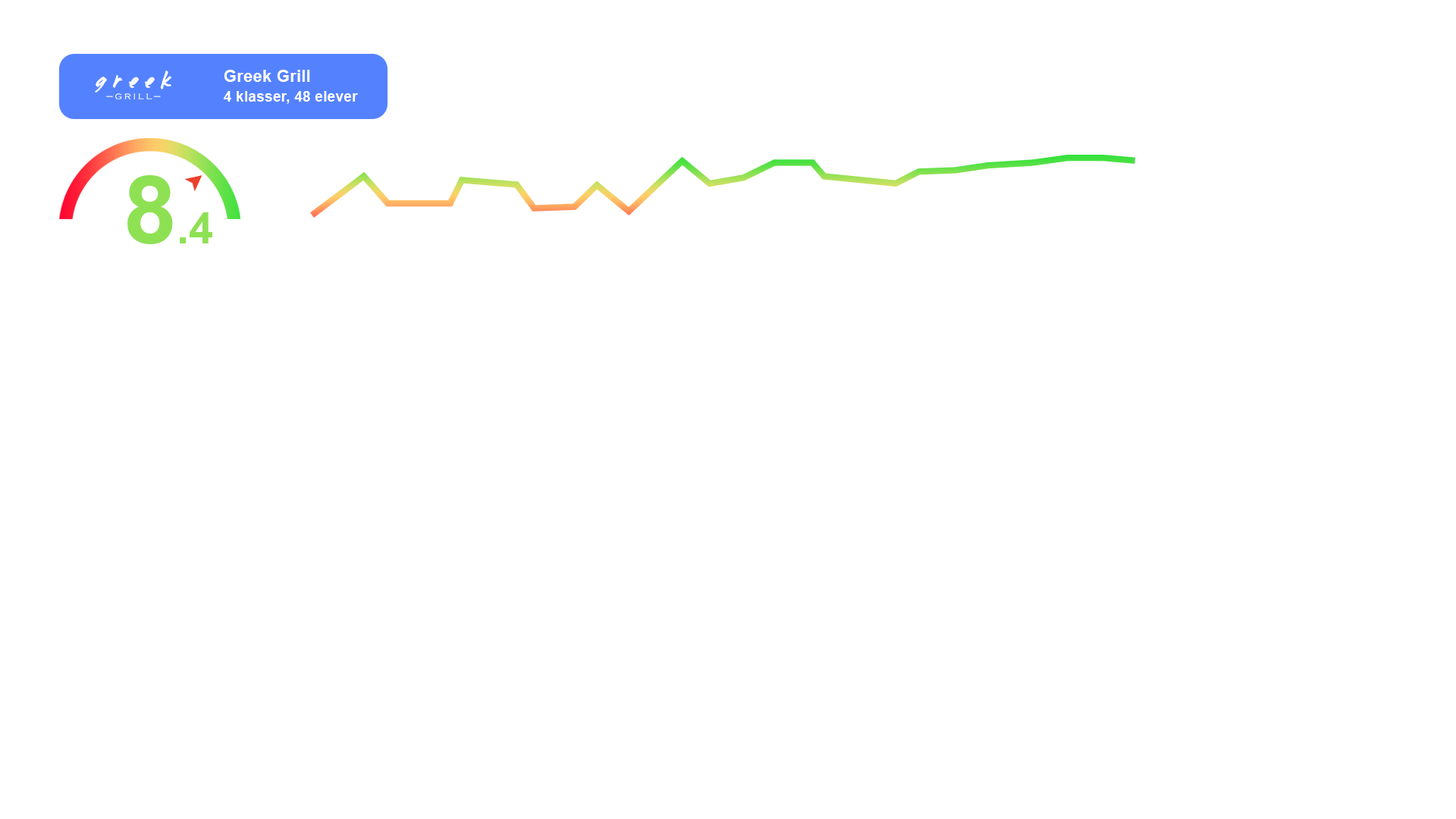
<style>
.page{position:relative;width:1456px;height:819px;background:#ffffff}
.page>*{position:absolute;margin:0}
.t1{font:14.8px/19.7px "Arial-BoldMT";letter-spacing:0.001em;color:#ffffff}
.t2{font:17px/19.7px "Arial-BoldMT";letter-spacing:0.001em;color:#ffffff}
.t3{font:44.3px "Arial-BoldMT";letter-spacing:0.001em;color:#8ee153}
.t4{font:95.5px "Arial-BoldMT";letter-spacing:0.001em;color:#8ee153}
</style>
<div class="page">
<p class="t1" style="left:224px;top:70px;width:134px;height:34px"><span class="t2">Greek Grill<br></span>4 klasser, 48 elever</p>
<p class="t3" style="left:127px;top:175px;width:85px;height:69px"><span class="t4">8</span>.4</p>
</div>
